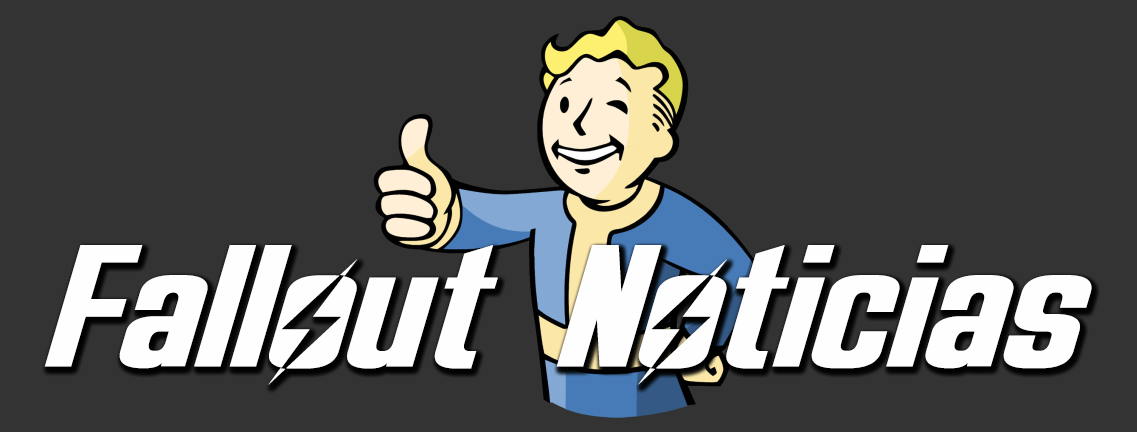
<style>
.page{position:relative;width:1137px;height:432px;background:#333333}
.page>*{position:absolute;margin:0}
.t1{font:177.3px "Overseer-Italic";color:#fefefe;scale:1.09 1}
</style>
<div class="page">
<p class="t1" style="left:44px;top:245px;width:1048px;height:140px">Fallout Noticias</p>
</div>
